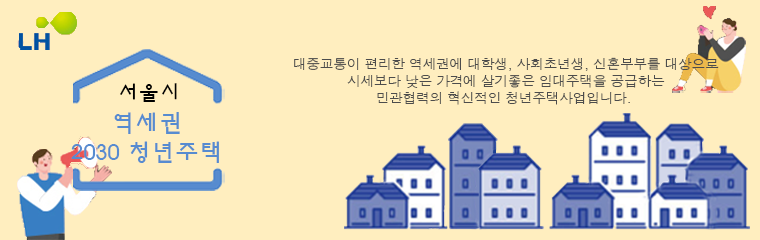
<style>
.page{position:relative;width:760px;height:240px;background:#ffeebf}
.page>*{position:absolute;margin:0}
.t1{font:13.9px "Dotum";letter-spacing:-0.03em;color:#4c4c4c}
.t2{font:20.8px "HYnamB";color:#000000}
.t3{font:24.3px "HYnamB";letter-spacing:-0.02em;color:#578bd0}
</style>
<div class="page">
<p class="t1" style="left:294px;top:57px;width:425px;height:48px;text-align:center">대중교통이 편리한 역세권에 대학생, 사회초년생, 신혼부부를 대상으로<br>시세보다 낮은 가격에 살기좋은 임대주택을 공급하는<br>민관협력의 혁신적인 청년주택사업입니다.</p>
<p class="t2" style="left:120px;top:83px;width:57px;height:19px">서울시</p>
<p class="t3" style="left:71px;top:112px;width:148px;height:51px;text-align:center">역세권<br>2030 청년주택</p>
</div>
